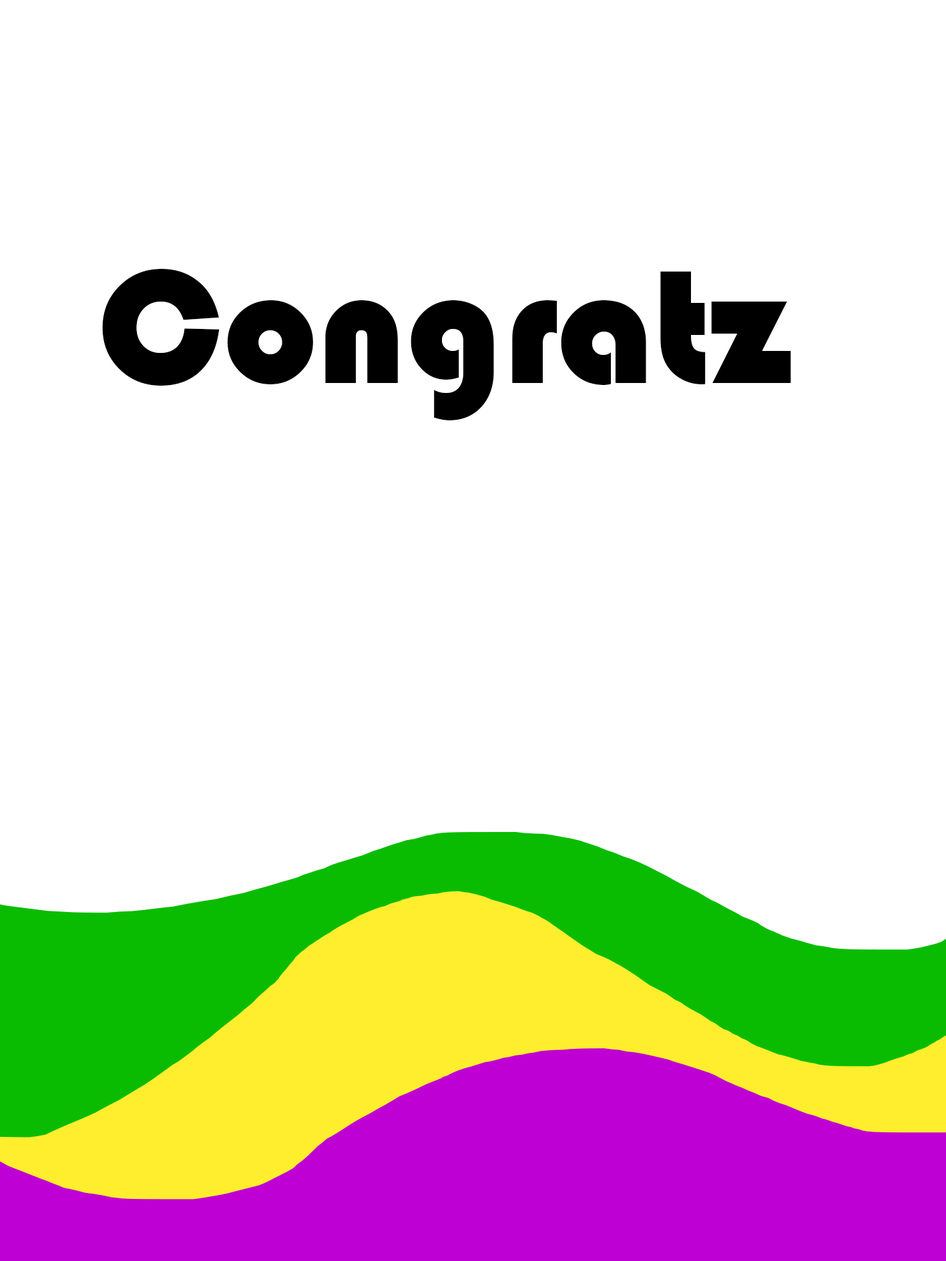
<style>
.page{position:relative;width:946px;height:1261px;background:#ffffff}
.page>*{position:absolute;margin:0}
.t1{font:166.8px "Bauhaus93";color:#000000}
</style>
<div class="page">
<p class="t1" style="left:102px;top:269px;width:689px;height:151px">Congratz</p>
</div>
